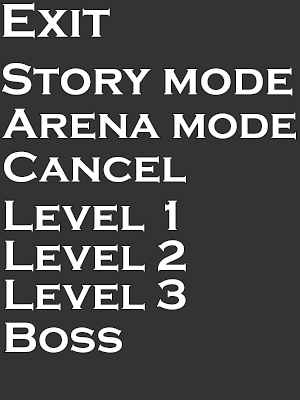
<style>
.page{position:relative;width:300px;height:400px;background:#333333}
.page>*{position:absolute;margin:0}
.t1{font:49px "CopperplateGothic-Bold";color:#ffffff}
.t2{font:46px "CopperplateGothic-Bold";color:#ffffff}
.t3{font:44px "CopperplateGothic-Bold";color:#ffffff}
</style>
<div class="page">
<p class="t1" style="left:2px;top:2px;width:108px;height:37px">Exit</p>
<p class="t2" style="left:2px;top:63px;width:291px;height:33px">Story mode</p>
<p class="t3" style="left:2px;top:108px;width:294px;height:32px">Arena mode</p>
<p class="t3" style="left:4px;top:151px;width:182px;height:32px">Cancel</p>
<p class="t3" style="left:4px;top:200px;width:173px;height:32px">Level 1</p>
<p class="t3" style="left:5px;top:240px;width:181px;height:32px">Level 2</p>
<p class="t3" style="left:5px;top:279px;width:181px;height:32px">Level 3</p>
<p class="t3" style="left:5px;top:322px;width:117px;height:31px">Boss</p>
</div>
